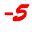
<style>
.page{position:relative;width:32px;height:32px;background:#ffffff}
.page>*{position:absolute;margin:0}
.t1{font:25px "BrushScriptStd";color:#ff0000}
</style>
<div class="page">
<p class="t1" style="left:4px;top:4px;width:26px;height:18px">-5</p>
</div>
